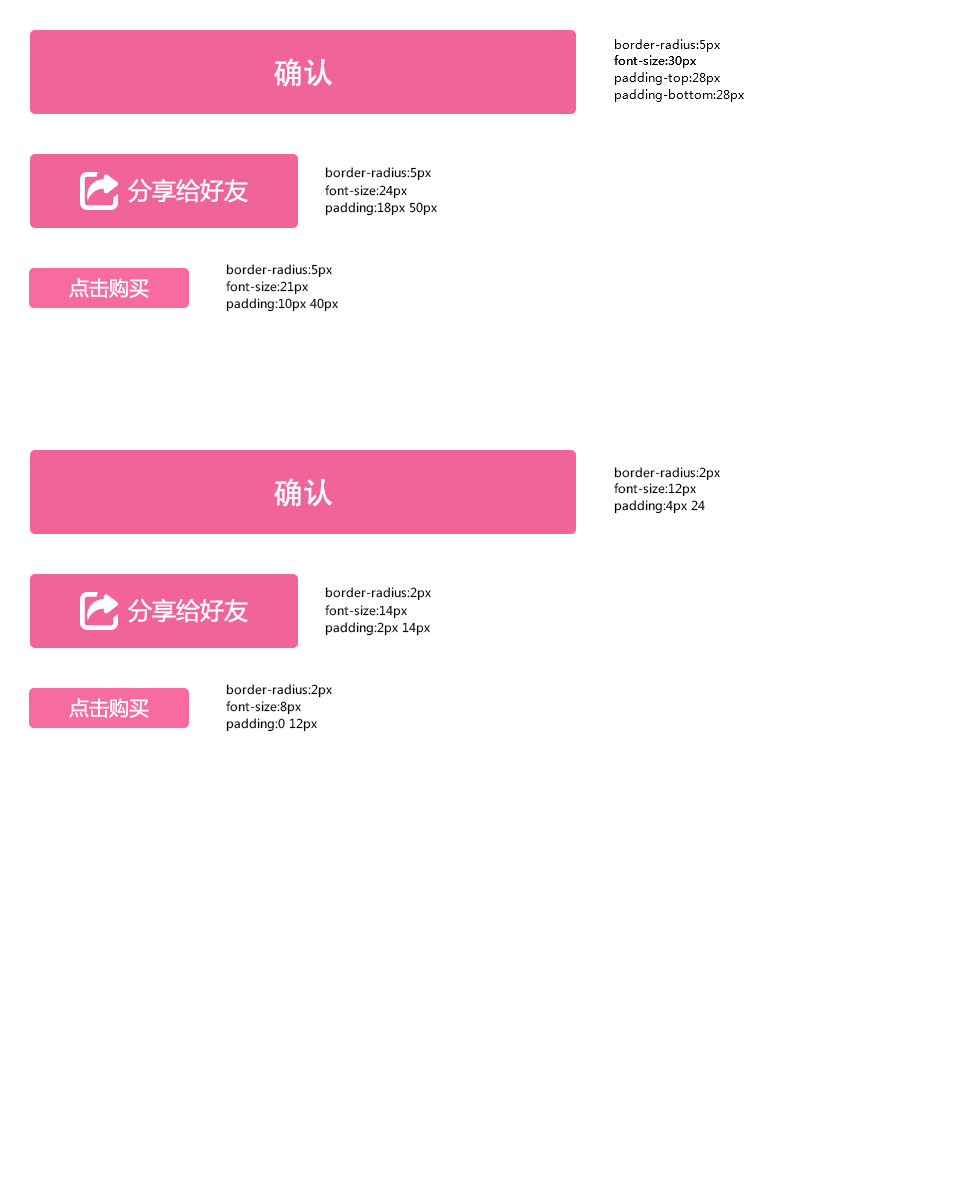
<style>
.page{position:relative;width:980px;height:1200px;background:#ffffff}
.page>*{position:absolute;margin:0}
.t1{font:12px "MicrosoftYaHei";color:#000000}
.t2{font:30px "AdobeHeitiStd-Regular";color:#ffffff}
.t3{font:24px "MicrosoftYaHei";color:#ffffff}
.t4{font:20px "MicrosoftYaHei";color:#ffffff}
</style>
<div class="page">
<p class="t1" style="left:615px;top:39px;width:105px;height:13px">border-radius:5px</p>
<p class="t2" style="left:274px;top:58px;width:59px;height:29px">确认</p>
<p class="t1" style="left:614px;top:55px;width:82px;height:13px">font-size:30px</p>
<p class="t1" style="left:614px;top:55px;width:82px;height:13px">font-size:30px</p>
<p class="t1" style="left:615px;top:72px;width:105px;height:13px">padding-top:28px</p>
<p class="t1" style="left:615px;top:89px;width:129px;height:13px">padding-bottom:28px</p>
<p class="t1" style="left:325px;top:167px;width:106px;height:14px">border-radius:5px</p>
<p class="t3" style="left:128px;top:178px;width:120px;height:25px">分享给好友</p>
<p class="t1" style="left:325px;top:185px;width:82px;height:14px">font-size:24px</p>
<p class="t1" style="left:325px;top:202px;width:112px;height:14px">padding:18px 50px</p>
<p class="t1" style="left:226px;top:264px;width:106px;height:14px">border-radius:5px</p>
<p class="t4" style="left:69px;top:278px;width:80px;height:20px">点击购买</p>
<p class="t1" style="left:226px;top:281px;width:82px;height:14px">font-size:21px</p>
<p class="t1" style="left:226px;top:298px;width:112px;height:14px">padding:10px 40px</p>
<p class="t1" style="left:614px;top:467px;width:106px;height:14px">border-radius:2px</p>
<p class="t2" style="left:274px;top:478px;width:59px;height:29px">确认</p>
<p class="t1" style="left:614px;top:483px;width:82px;height:14px">font-size:12px</p>
<p class="t1" style="left:614px;top:500px;width:91px;height:14px">padding:4px 24</p>
<p class="t1" style="left:325px;top:587px;width:106px;height:14px">border-radius:2px</p>
<p class="t3" style="left:128px;top:598px;width:120px;height:25px">分享给好友</p>
<p class="t1" style="left:325px;top:605px;width:82px;height:14px">font-size:14px</p>
<p class="t1" style="left:325px;top:622px;width:105px;height:14px">padding:2px 14px</p>
<p class="t1" style="left:226px;top:684px;width:106px;height:14px">border-radius:2px</p>
<p class="t4" style="left:69px;top:698px;width:80px;height:20px">点击购买</p>
<p class="t1" style="left:226px;top:701px;width:75px;height:14px">font-size:8px</p>
<p class="t1" style="left:226px;top:718px;width:91px;height:14px">padding:0 12px</p>
</div>
